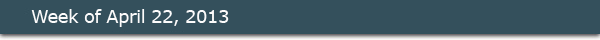
<style>
.page{position:relative;width:600px;height:40px;background:#34505c}
.page>*{position:absolute;margin:0}
.t1{font:18px "Verdana";letter-spacing:-0.025em;color:#fcfbfb}
</style>
<div class="page">
<p class="t1" style="left:31px;top:9px;width:198px;height:18px">Week of April 22, 2013</p>
</div>
